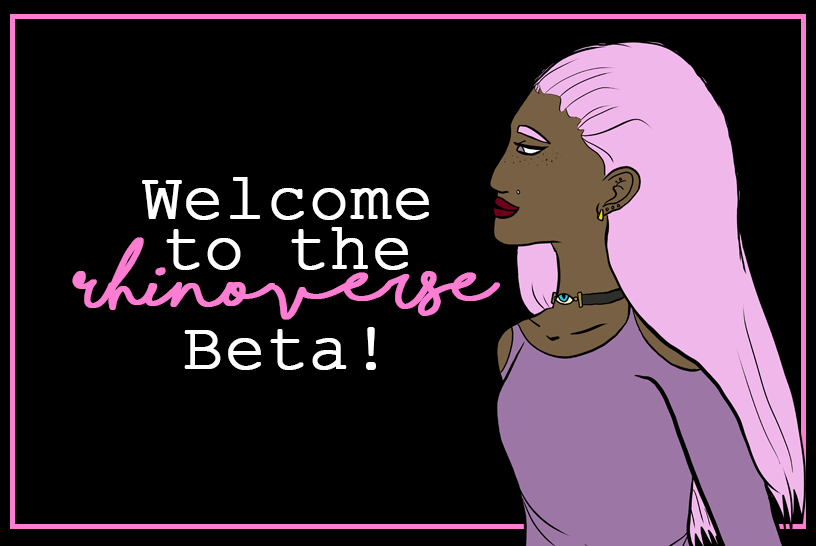
<style>
.page{position:relative;width:816px;height:546px;background:#000000}
.page>*{position:absolute;margin:0}
.t1{font:66.7px/50px "CourierNewPSMT";color:#ffffff;font-weight:bold}
.t2{font:66.7px/50px "ShorelinesScriptBold";color:#fc7dd1;font-weight:bold}
</style>
<div class="page">
<p class="t1" style="left:72px;top:177px;width:428px;height:193px;text-align:center">Welcome<br>to the<br><span class="t2">Rhinoverse<br></span>Beta!</p>
</div>
